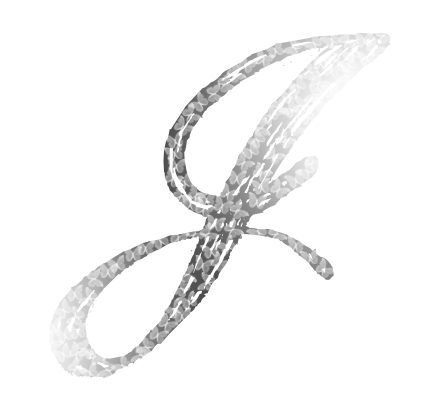
<style>
.page{position:relative;width:437px;height:413px;background:#ffffff}
.page>*{position:absolute;margin:0}
.t1{font:632.9px "ANGELTEARS-trial"}
</style>
<div class="page">
<p class="t1" style="left:49px;top:32px;width:342px;height:346px">J</p>
</div>
